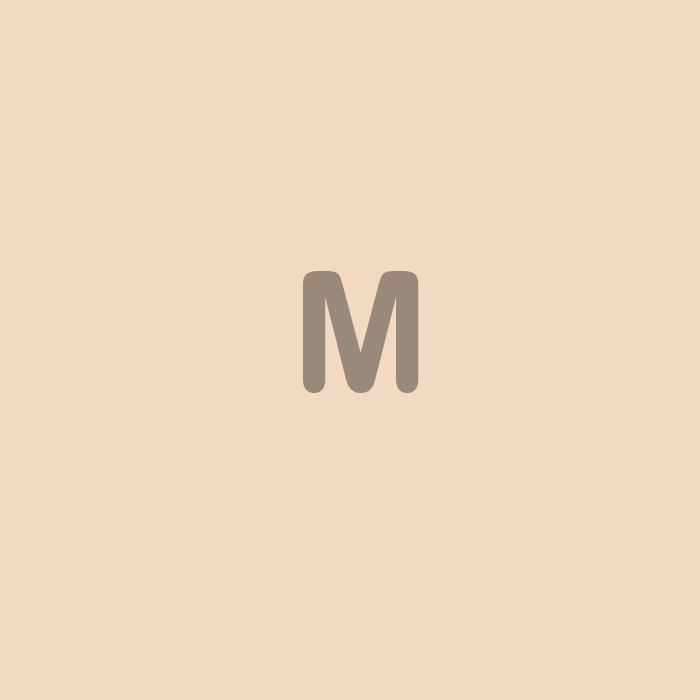
<style>
.page{position:relative;width:700px;height:700px;background:#f4d9c2}
.page>*{position:absolute;margin:0}
.t1{font:166.7px "ArialRoundedMTBold";color:#9a897b}
</style>
<div class="page">
<p class="t1" style="left:302px;top:271px;width:117px;height:122px">M</p>
</div>
